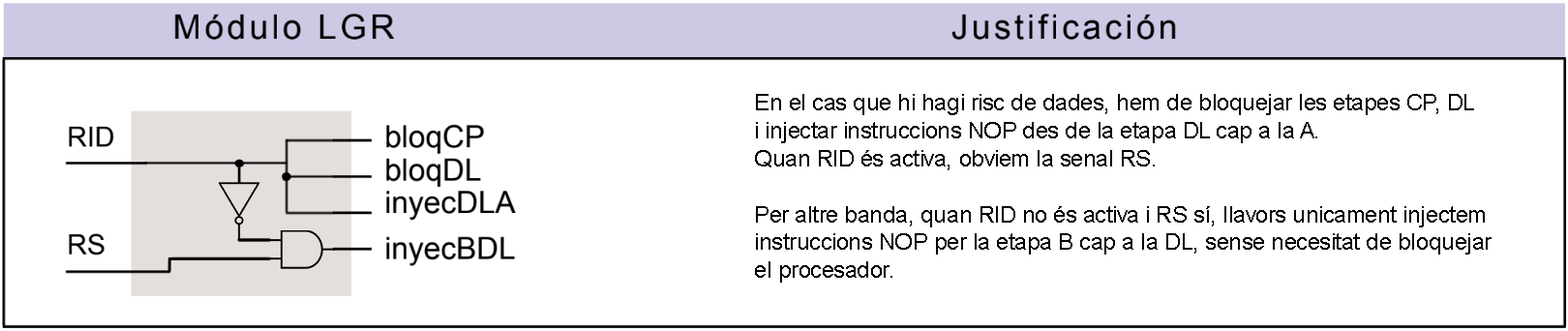
<style>
.page{position:relative;width:1568px;height:331px;background:#ffffff}
.page>*{position:absolute;margin:0}
.t1{font:23.2px "ArialMT";letter-spacing:-0.02em;color:#000000}
</style>
<div class="page">
<p class="t1" style="left:755px;top:94px;width:737px;height:189px">En el cas que hi hagi risc de dades, hem de bloquejar les etapes CP, DL<br>i injectar instruccions NOP des de la etapa DL cap a la A.<br>Quan RID és activa, obviem la senal RS.<br><br>Per altre banda, quan RID no és activa i RS sí, llavors unicament injectem<br>instruccions NOP per la etapa B cap a la DL, sense necesitat de bloquejar<br>el procesador.</p>
</div>
